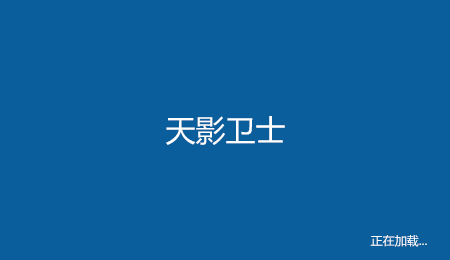
<style>
.page{position:relative;width:450px;height:260px;background:#0a5e9c}
.page>*{position:absolute;margin:0}
.t1{font:30px "MicrosoftYaHei";color:#ffffff}
.t2{font:12px "MicrosoftYaHei";color:#ffffff}
</style>
<div class="page">
<p class="t1" style="left:166px;top:116px;width:119px;height:29px">天影卫士</p>
<p class="t2" style="left:370px;top:235px;width:57px;height:12px">正在加载...</p>
</div>
